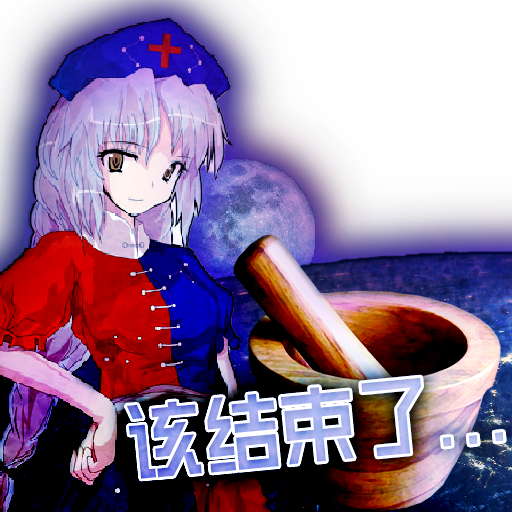
<style>
.page{position:relative;width:512px;height:512px}
.page>*{position:absolute;margin:0}
.t1{font:83.3px "ChuangkitKingKongRegular";scale:0.92 1}
</style>
<div class="page">
<p class="t1" style="left:126px;top:377px;width:378px;height:102px;rotate:-6deg">该结束了...</p>
</div>
